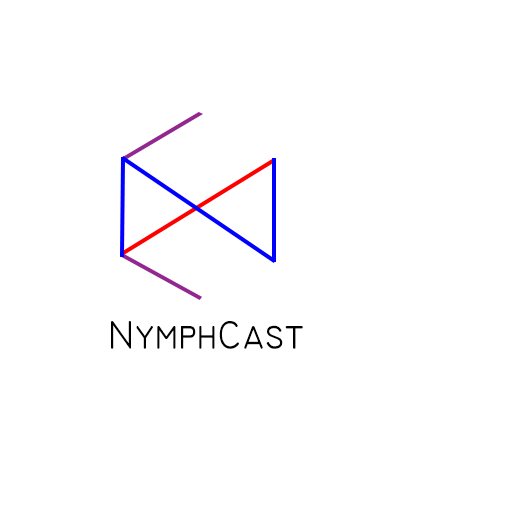
<style>
.page{position:relative;width:512px;height:512px;background:#ffffff}
.page>*{position:absolute;margin:0}
.t1{font:40px "Technic";color:#000000}
</style>
<div class="page">
<p class="t1" style="left:111px;top:321px;width:192px;height:28px">NymphCast</p>
</div>
